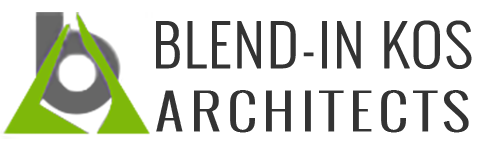
<style>
.page{position:relative;width:479px;height:152px;background:#ffffff}
.page>*{position:absolute;margin:0}
.t1{font:55.5px "Oswald-Light";letter-spacing:0.005em;color:#333333;font-weight:bold;scale:1.08 1}
.t2{font:47.5px "Oswald-Light";letter-spacing:0.1em;color:#333333;font-weight:bold;scale:1.2 1}
</style>
<div class="page">
<p class="t1" style="left:156px;top:20px;width:316px;height:49px">BLEND-IN KOS</p>
<p class="t2" style="left:156px;top:90px;width:313px;height:43px">ARCHITECTS</p>
</div>
